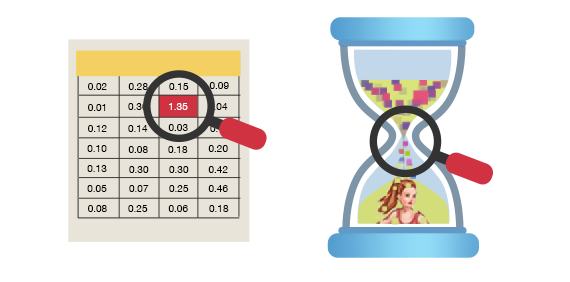
<style>
.page{position:relative;width:570px;height:282px;background:#ffffff}
.page>*{position:absolute;margin:0}
.t1{font:10px "HelveticaNeue";color:#000000}
.t2{font:10px "HelveticaNeue"}
.t3{font:10px "HelveticaNeue";color:#ffffff}
</style>
<div class="page">
<p class="t1" style="left:88px;top:83px;width:19px;height:7px">0.02</p>
<p class="t1" style="left:128px;top:83px;width:20px;height:7px">0.28</p>
<p class="t1" style="left:169px;top:83px;width:20px;height:7px">0.15</p>
<p class="t1" style="left:209px;top:82px;width:20px;height:7px">0.09</p>
<p class="t1" style="left:88px;top:104px;width:18px;height:7px">0.01</p>
<p class="t2" style="left:128px;top:103px;width:20px;height:7px">0.36</p>
<p class="t3" style="left:169px;top:103px;width:19px;height:7px">1.35</p>
<p class="t2" style="left:208px;top:103px;width:20px;height:7px">0.04</p>
<p class="t1" style="left:88px;top:125px;width:19px;height:7px">0.12</p>
<p class="t1" style="left:128px;top:125px;width:20px;height:7px">0.14</p>
<p class="t1" style="left:168px;top:124px;width:20px;height:7px">0.03</p>
<p class="t1" style="left:87px;top:145px;width:20px;height:7px">0.10</p>
<p class="t1" style="left:128px;top:146px;width:20px;height:7px">0.08</p>
<p class="t1" style="left:168px;top:146px;width:20px;height:7px">0.18</p>
<p class="t1" style="left:208px;top:145px;width:20px;height:7px">0.20</p>
<p class="t1" style="left:87px;top:165px;width:20px;height:7px">0.13</p>
<p class="t1" style="left:129px;top:166px;width:20px;height:7px">0.30</p>
<p class="t1" style="left:169px;top:166px;width:20px;height:7px">0.30</p>
<p class="t1" style="left:208px;top:166px;width:20px;height:7px">0.42</p>
<p class="t1" style="left:87px;top:185px;width:20px;height:7px">0.05</p>
<p class="t1" style="left:129px;top:185px;width:20px;height:7px">0.07</p>
<p class="t1" style="left:169px;top:185px;width:20px;height:7px">0.25</p>
<p class="t1" style="left:208px;top:185px;width:20px;height:7px">0.46</p>
<p class="t1" style="left:88px;top:205px;width:19px;height:7px">0.08</p>
<p class="t1" style="left:128px;top:205px;width:20px;height:7px">0.25</p>
<p class="t1" style="left:168px;top:205px;width:20px;height:7px">0.06</p>
<p class="t1" style="left:209px;top:205px;width:20px;height:7px">0.18</p>
</div>
